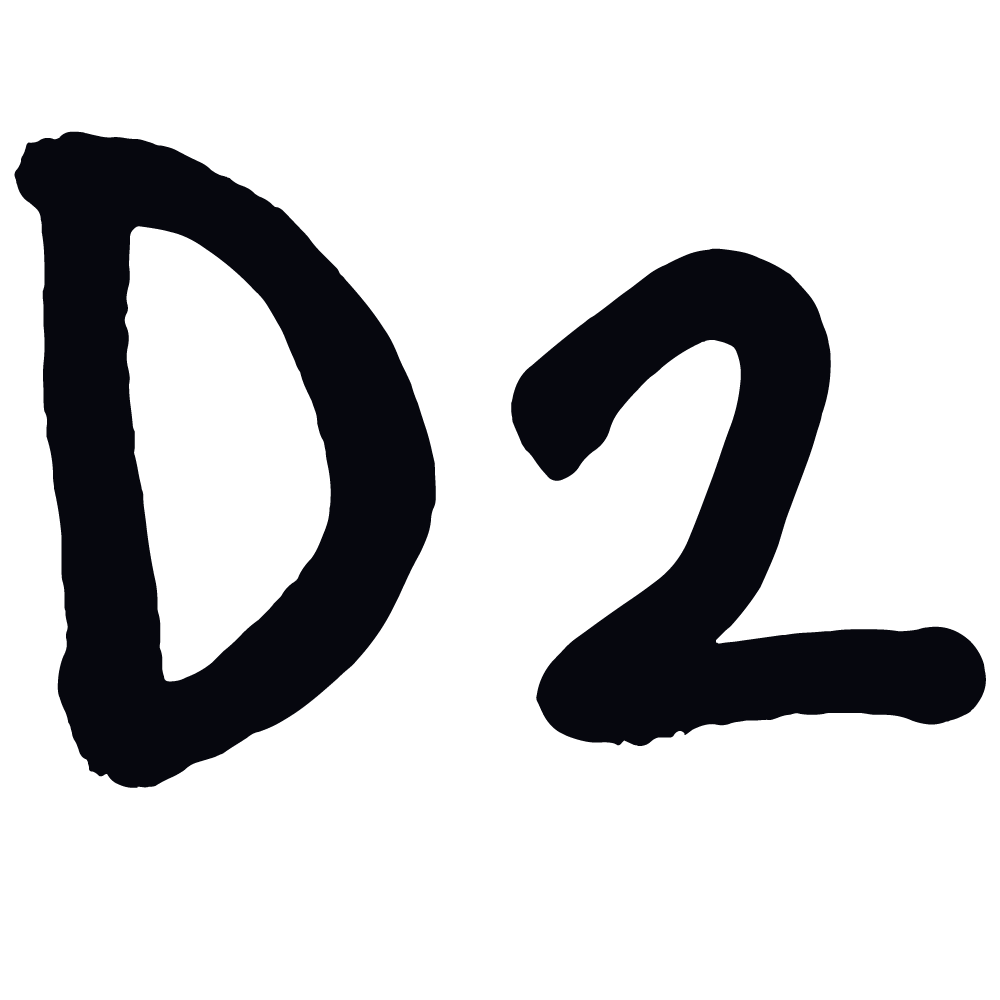
<style>
.page{position:relative;width:1000px;height:1000px;background:#ffffff}
.page>*{position:absolute;margin:0}
.t1{font:946.7px "Lacquer-Regular";color:#06070e}
</style>
<div class="page">
<p class="t1" style="left:14px;top:131px;width:972px;height:657px">d2</p>
</div>
